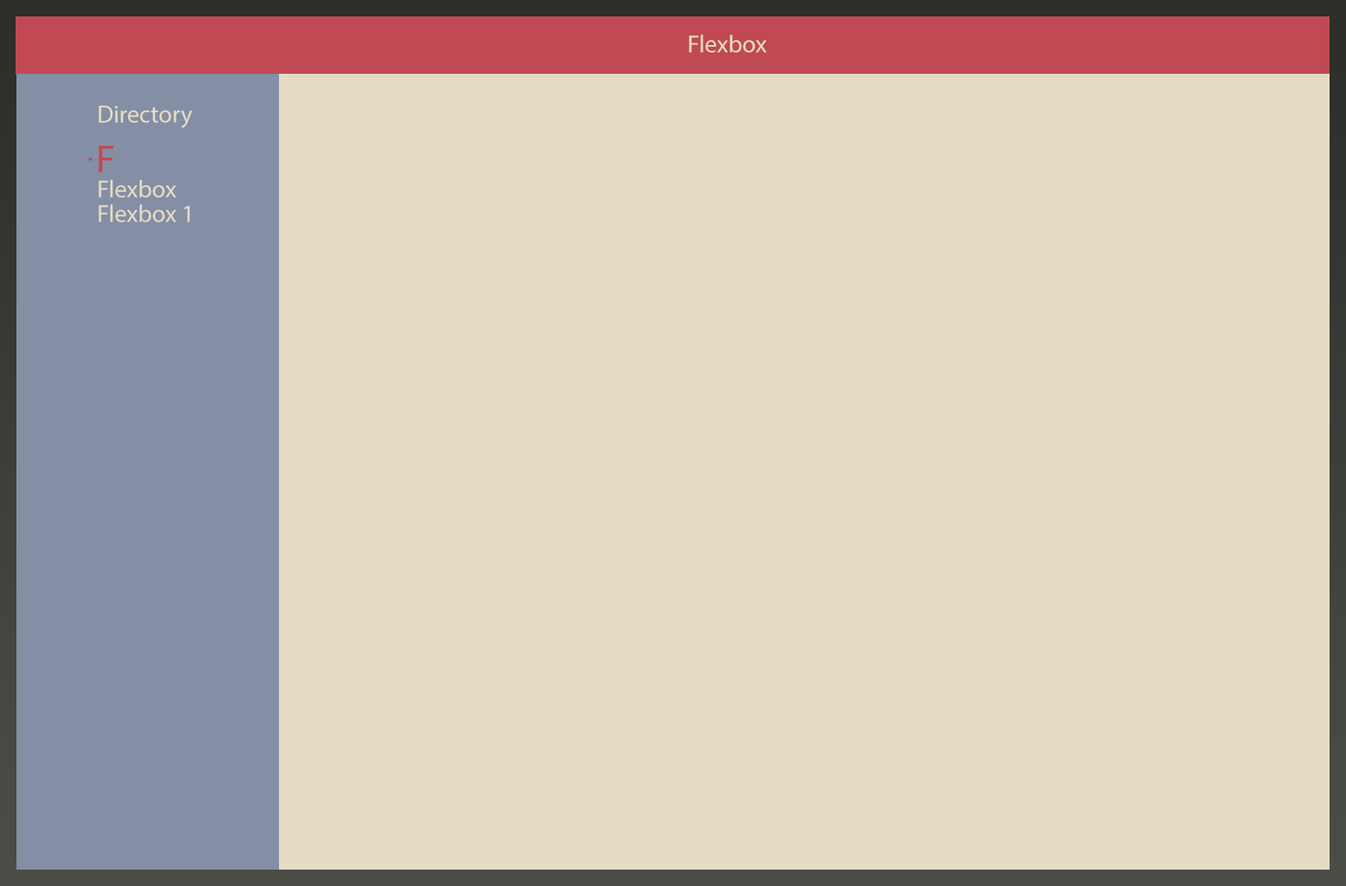
<style>
.page{position:relative;width:1346px;height:886px;background:#e5dcc5}
.page>*{position:absolute;margin:0}
.t1{font:24.6px "MyriadPro-Regular";color:#e5dcc5}
.t2{font:39.4px "MyriadPro-Regular";color:#c14953}
</style>
<div class="page">
<p class="t1" style="left:688px;top:34px;width:78px;height:19px">Flexbox</p>
<p class="t1" style="left:98px;top:105px;width:95px;height:23px">Directory</p>
<p class="t2" style="left:98px;top:145px;width:15px;height:27px">F</p>
<p class="t1" style="left:98px;top:180px;width:78px;height:18px">Flexbox</p>
<p class="t1" style="left:98px;top:204px;width:92px;height:18px">Flexbox 1</p>
</div>
